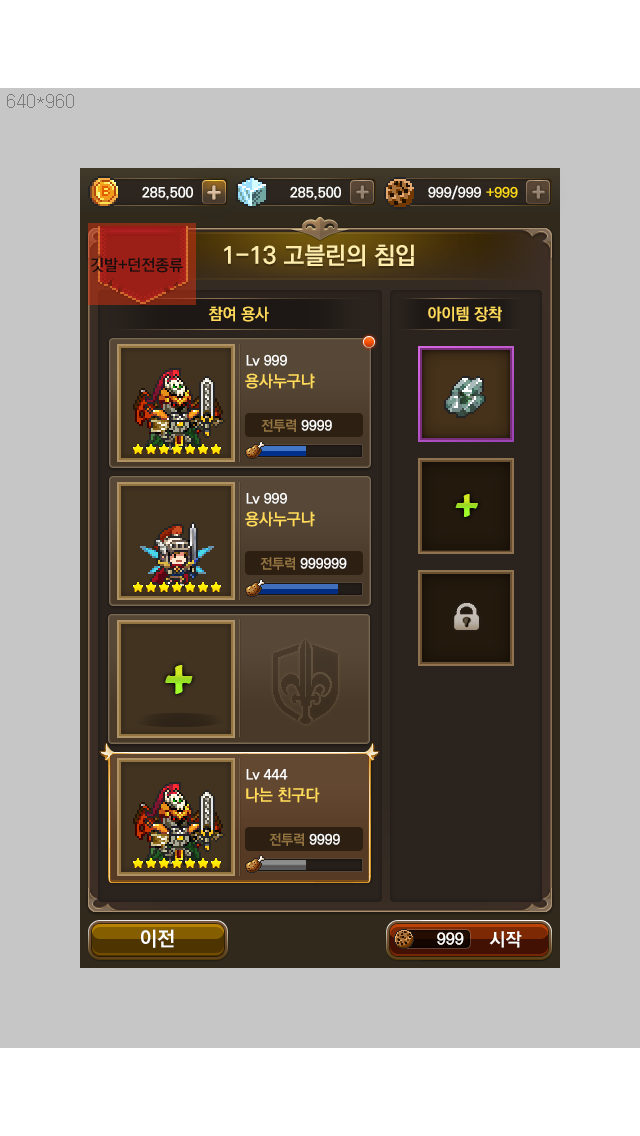
<style>
.page{position:relative;width:640px;height:1136px;background:#c6c6c6}
.page>*{position:absolute;margin:0}
.t1{font:24px "KoPubDotumBold";color:#ffedab}
.t2{font:16px "KoPubDotumBold";color:#1b0e0f}
.t3{font:16px "KoPubDotumBold";color:#ffda5b}
.t4{font:14px "KoPubDotumBold";color:#ffffff}
.t5{font:16px "KoPubDotumBold";color:#ffda5a}
.t6{font:14px "KoPubDotumBold";color:#937441}
.t7{font:48px "CooperBlack";scale:0.96 1}
.t8{font:58px "CooperBlack";scale:0.96 1}
.t9{font:20px "KoPubDotumBold";color:#ffffff}
.t10{font:16px "KoPubDotumBold";color:#ffffff}
.t11{font:18px "KoPubDotumBold";color:#ffffff}
</style>
<div class="page">
<p class="t1" style="left:224px;top:244px;width:190px;height:23px">1-13 고블린의 침입</p>
<p class="t2" style="left:91px;top:257px;width:92px;height:16px">깃발+던전종류</p>
<p class="t3" style="left:208px;top:306px;width:61px;height:16px">참여 용사</p>
<p class="t3" style="left:428px;top:306px;width:74px;height:16px">아이템 장착</p>
<p class="t4" style="left:246px;top:354px;width:41px;height:12px">Lv 999</p>
<p class="t5" style="left:245px;top:373px;width:70px;height:16px">용사누구냐</p>
<p class="t6" style="left:261px;top:419px;width:35px;height:13px">전투력</p>
<p class="t4" style="left:301px;top:419px;width:31px;height:12px">9999</p>
<p class="t4" style="left:246px;top:492px;width:41px;height:12px">Lv 999</p>
<p class="t7" style="left:455px;top:494px;width:23px;height:23px">+</p>
<p class="t5" style="left:245px;top:511px;width:70px;height:16px">용사누구냐</p>
<p class="t6" style="left:260px;top:557px;width:35px;height:13px">전투력</p>
<p class="t4" style="left:300px;top:557px;width:47px;height:12px">999999</p>
<p class="t8" style="left:165px;top:665px;width:28px;height:29px">+</p>
<p class="t4" style="left:246px;top:769px;width:42px;height:11px">Lv 444</p>
<p class="t5" style="left:246px;top:787px;width:74px;height:16px">나는 친구다</p>
<p class="t6" style="left:269px;top:833px;width:35px;height:13px">전투력</p>
<p class="t4" style="left:309px;top:833px;width:31px;height:12px">9999</p>
<p class="t9" style="left:141px;top:929px;width:33px;height:19px">이전</p>
<p class="t10" style="left:437px;top:932px;width:27px;height:13px">999</p>
<p class="t11" style="left:489px;top:931px;width:33px;height:17px">시작</p>
</div>
